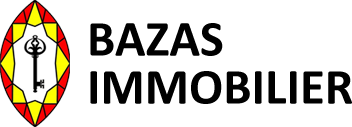
<style>
.page{position:relative;width:352px;height:127px;background:#ffffff}
.page>*{position:absolute;margin:0}
.t1{font:50.6px/48px "Calibri-Bold";color:#000000;text-transform:uppercase}
</style>
<div class="page">
<p class="t1" style="left:90px;top:23px;width:262px;height:81px">Bazas<br>Immobilier</p>
</div>
